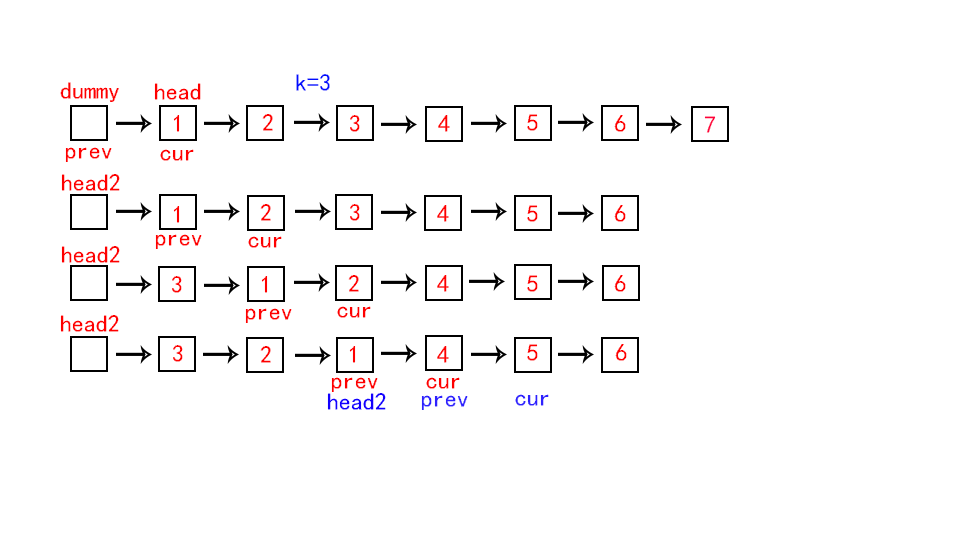
<style>
.page{position:relative;width:960px;height:558px;background:#ffffff}
.page>*{position:absolute;margin:0}
.t1{font:24px "¿¬Ìå";color:#000cfe}
.t2{font:24px "¿¬Ìå";color:#fe0000}
.t3{font:24px "¿¬Ìå";color:#ff003d}
.t4{font:24px "¿¬Ìå";color:#1200fe}
.t5{font:24px "¿¬Ìå";color:#2e21fe}
</style>
<div class="page">
<p class="t1" style="left:296px;top:74px;width:34px;height:17px">k=3</p>
<p class="t2" style="left:60px;top:82px;width:59px;height:20px">dummy</p>
<p class="t2" style="left:154px;top:83px;width:47px;height:17px">head</p>
<p class="t2" style="left:173px;top:115px;width:7px;height:17px">1</p>
<p class="t2" style="left:262px;top:114px;width:11px;height:17px">2</p>
<p class="t2" style="left:350px;top:115px;width:10px;height:17px">3</p>
<p class="t2" style="left:438px;top:115px;width:12px;height:17px">4</p>
<p class="t2" style="left:527px;top:114px;width:11px;height:17px">5</p>
<p class="t2" style="left:614px;top:115px;width:12px;height:17px">6</p>
<p class="t3" style="left:704px;top:116px;width:12px;height:17px">7</p>
<p class="t2" style="left:65px;top:147px;width:47px;height:15px">prev</p>
<p class="t2" style="left:160px;top:149px;width:34px;height:12px">cur</p>
<p class="t2" style="left:61px;top:174px;width:59px;height:17px">head2</p>
<p class="t2" style="left:173px;top:206px;width:7px;height:17px">1</p>
<p class="t2" style="left:260px;top:204px;width:11px;height:17px">2</p>
<p class="t2" style="left:350px;top:204px;width:10px;height:17px">3</p>
<p class="t2" style="left:437px;top:205px;width:12px;height:17px">4</p>
<p class="t2" style="left:527px;top:205px;width:11px;height:17px">5</p>
<p class="t2" style="left:614px;top:205px;width:12px;height:17px">6</p>
<p class="t2" style="left:61px;top:246px;width:59px;height:17px">head2</p>
<p class="t2" style="left:155px;top:234px;width:47px;height:15px">prev</p>
<p class="t2" style="left:248px;top:236px;width:34px;height:12px">cur</p>
<p class="t2" style="left:172px;top:276px;width:10px;height:17px">3</p>
<p class="t2" style="left:261px;top:276px;width:7px;height:17px">1</p>
<p class="t2" style="left:348px;top:275px;width:11px;height:17px">2</p>
<p class="t2" style="left:437px;top:275px;width:12px;height:17px">4</p>
<p class="t2" style="left:527px;top:275px;width:11px;height:17px">5</p>
<p class="t2" style="left:614px;top:275px;width:12px;height:17px">6</p>
<p class="t2" style="left:60px;top:315px;width:59px;height:17px">head2</p>
<p class="t2" style="left:245px;top:308px;width:47px;height:15px">prev</p>
<p class="t2" style="left:337px;top:306px;width:34px;height:12px">cur</p>
<p class="t2" style="left:173px;top:345px;width:10px;height:17px">3</p>
<p class="t2" style="left:260px;top:346px;width:11px;height:17px">2</p>
<p class="t2" style="left:349px;top:346px;width:7px;height:17px">1</p>
<p class="t2" style="left:437px;top:346px;width:12px;height:17px">4</p>
<p class="t2" style="left:527px;top:344px;width:11px;height:17px">5</p>
<p class="t2" style="left:615px;top:344px;width:12px;height:17px">6</p>
<p class="t2" style="left:331px;top:377px;width:47px;height:15px">prev</p>
<p class="t2" style="left:426px;top:377px;width:34px;height:12px">cur</p>
<p class="t4" style="left:327px;top:393px;width:59px;height:17px">head2</p>
<p class="t5" style="left:421px;top:395px;width:47px;height:15px">prev</p>
<p class="t5" style="left:515px;top:394px;width:34px;height:12px">cur</p>
</div>
